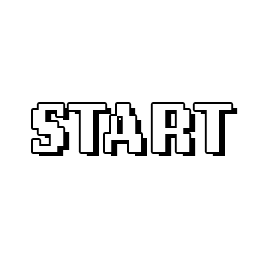
<style>
.page{position:relative;width:256px;height:256px;background:#ffffff}
.page>*{position:absolute;margin:0}
.t1{font:72px "LoRes12OT-Bold";color:#fefefe}
.t2{font:72px "LoRes12OT-Bold"}
</style>
<div class="page">
<p class="t1" style="left:33px;top:104px;width:199px;height:48px">START</p>
<p class="t2" style="left:39px;top:108px;width:199px;height:48px">START</p>
</div>
